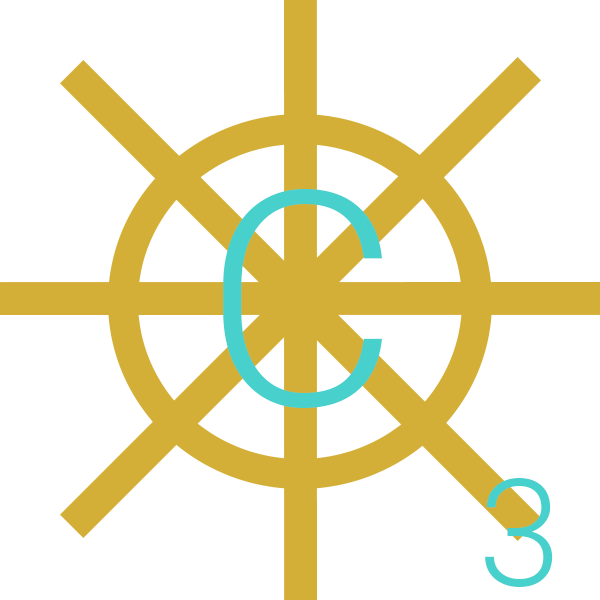
<style>
.page{position:relative;width:600px;height:600px;background:#ffffff}
.page>*{position:absolute;margin:0}
.t1{font:300px "Roboto-Light";color:#48d1cc}
.t2{font:150px "Roboto-Light";color:#48d1cc}
</style>
<div class="page">
<p class="t1" style="left:223px;top:189px;width:159px;height:219px">C</p>
<p class="t2" style="left:485px;top:478px;width:68px;height:109px">3</p>
</div>
